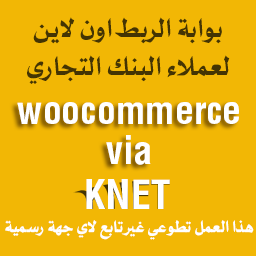
<style>
.page{position:relative;width:256px;height:256px;background:#f2b705}
.page>*{position:absolute;margin:0}
.t1{font:31.6px "AbdoLine-Black";color:#443403}
.t2{font:37.7px "ArenaCondensedBold";color:#ffffff}
.t3{font:39.5px "ArenaCondensedBold";color:#ffffff}
.t4{font:19.4px "AbdoLine-Black";color:#ffffff}
</style>
<div class="page">
<p class="t1" style="left:27px;top:17px;width:203px;height:67px;text-align:center">بوابة الربط اون لاين<br>لعملاء البنك التجاري</p>
<p class="t2" style="left:17px;top:102px;width:222px;height:22px">woocommerce</p>
<p class="t2" style="left:106px;top:135px;width:45px;height:30px">via</p>
<p class="t3" style="left:86px;top:179px;width:84px;height:30px">KNET</p>
<p class="t4" style="left:5px;top:220px;width:249px;height:20px">هذا العمل تطوعي غير تابع لاي جهة رسمية</p>
</div>
